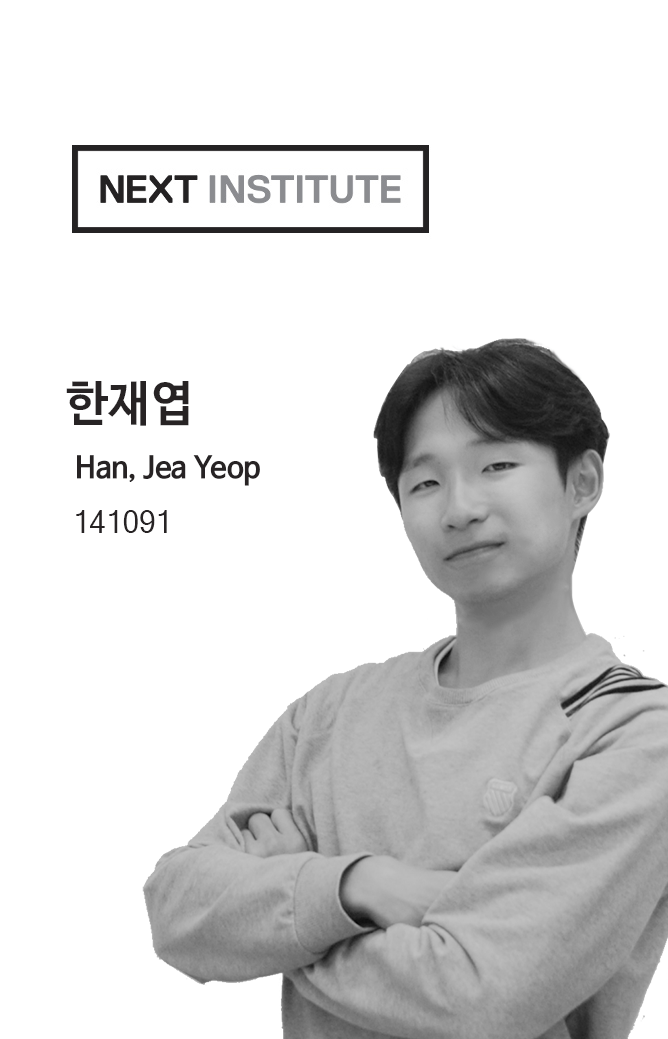
<style>
.page{position:relative;width:668px;height:1039px;background:#ffffff}
.page>*{position:absolute;margin:0}
.t1{font:48.2px "NanumBarunGothicOTFBold";color:#272324}
.t2{font:29.8px "NanumBarunGothicOTFBold";color:#272324}
.t3{font:30.7px "MicrosoftSansSerif";color:#272324;scale:0.97 1}
</style>
<div class="page">
<p class="t1" style="left:66px;top:381px;width:123px;height:45px">한재엽</p>
<p class="t2" style="left:77px;top:455px;width:183px;height:31px">Han, Jea Yeop</p>
<p class="t3" style="left:76px;top:510px;width:91px;height:23px">141091</p>
</div>
